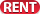
<style>
.page{position:relative;width:40px;height:14px;background:#ffffff}
.page>*{position:absolute;margin:0}
.t1{font:14px "MyriadPro-Bold";color:#ffffff}
</style>
<div class="page">
<p class="t1" style="left:4px;top:2px;width:33px;height:10px">RENT</p>
</div>
